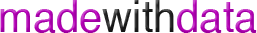
<style>
.page{position:relative;width:257px;height:33px;background:#ffffff}
.page>*{position:absolute;margin:0}
.t1{font:43.8px "Helvetica";color:#b400b6;scale:0.95 1}
.t2{font:43.8px "Helvetica";color:#222222;scale:0.95 1}
</style>
<div class="page">
<p class="t1" style="left:0px;top:0px;width:257px;height:33px">made<span class="t2">with</span>data</p>
</div>
